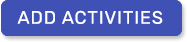
<style>
.page{position:relative;width:187px;height:42px;background:#3f51b5}
.page>*{position:absolute;margin:0}
.t1{font:18px "Rubik-Regular";letter-spacing:0.05em;color:#ffffff}
</style>
<div class="page">
<p class="t1" style="left:17px;top:10px;width:146px;height:14px">ADD ACTIVITIES</p>
</div>
